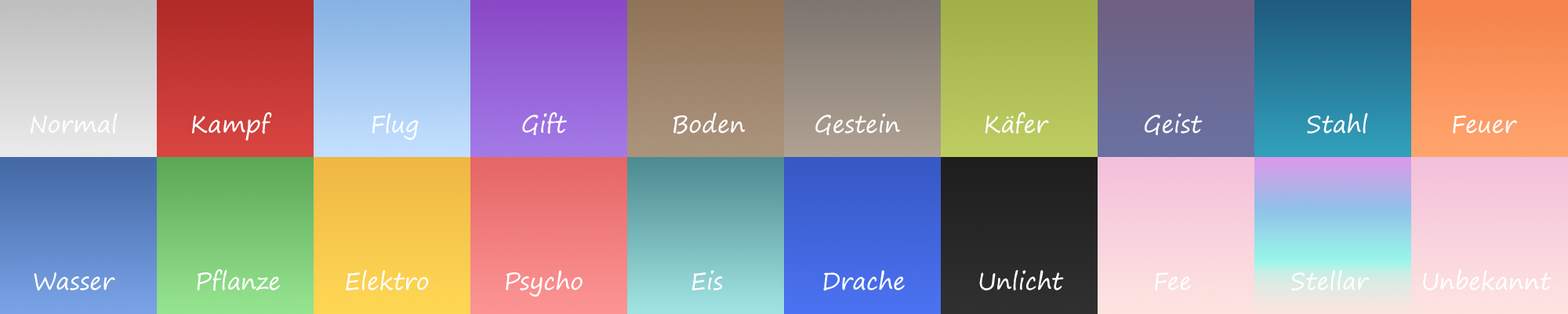
<style>
.page{position:relative;width:1568px;height:314px}
.page>*{position:absolute;margin:0}
.t1{font:23.5px "SegoePrint";color:#ffffff}
</style>
<div class="page">
<p class="t1" style="left:31px;top:113px;width:87px;height:20px">Normal</p>
<p class="t1" style="left:192px;top:112px;width:80px;height:28px">Kampf</p>
<p class="t1" style="left:372px;top:113px;width:47px;height:27px">Flug</p>
<p class="t1" style="left:522px;top:112px;width:45px;height:24px">Gift</p>
<p class="t1" style="left:673px;top:112px;width:73px;height:22px">Boden</p>
<p class="t1" style="left:815px;top:113px;width:85px;height:23px">Gestein</p>
<p class="t1" style="left:985px;top:112px;width:64px;height:22px">Käfer</p>
<p class="t1" style="left:1145px;top:113px;width:58px;height:23px">Geist</p>
<p class="t1" style="left:1307px;top:113px;width:61px;height:20px">Stahl</p>
<p class="t1" style="left:1453px;top:115px;width:64px;height:18px">Feuer</p>
<p class="t1" style="left:197px;top:269px;width:83px;height:22px">Pflanze</p>
<p class="t1" style="left:346px;top:270px;width:83px;height:20px">Elektro</p>
<p class="t1" style="left:506px;top:270px;width:77px;height:26px">Psycho</p>
<p class="t1" style="left:691px;top:270px;width:32px;height:20px">Eis</p>
<p class="t1" style="left:823px;top:270px;width:82px;height:21px">Drache</p>
<p class="t1" style="left:979px;top:270px;width:85px;height:20px">Unlicht</p>
<p class="t1" style="left:1291px;top:270px;width:79px;height:20px">Stellar</p>
<p class="t1" style="left:1423px;top:269px;width:129px;height:21px">Unbekannt</p>
<p class="t1" style="left:34px;top:272px;width:81px;height:19px">Wasser</p>
<p class="t1" style="left:1155px;top:272px;width:36px;height:18px">Fee</p>
</div>
